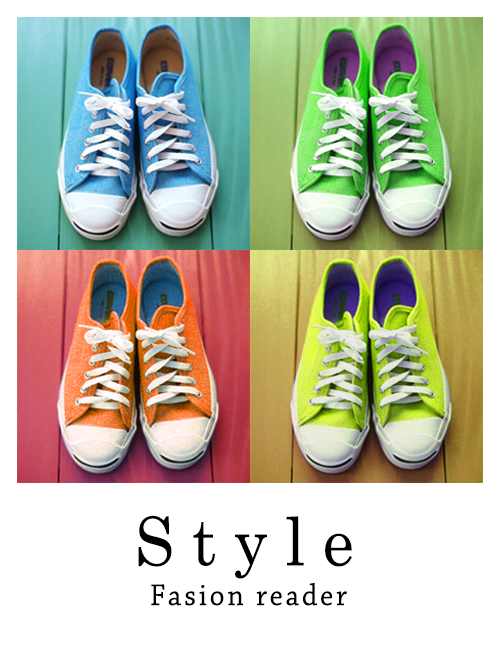
<style>
.page{position:relative;width:500px;height:650px;background:#ffffff}
.page>*{position:absolute;margin:0}
.t1{font:67.1px "CenturySchoolbook";letter-spacing:0.28em;color:#000000;scale:0.94 1}
.t2{font:31.5px "ChaparralPro-Regular";letter-spacing:0.1em;color:#000000;scale:0.93 1}
</style>
<div class="page">
<p class="t1" style="left:138px;top:515px;width:214px;height:64px">Style</p>
<p class="t2" style="left:151px;top:582px;width:197px;height:24px">Fasion reader</p>
</div>
